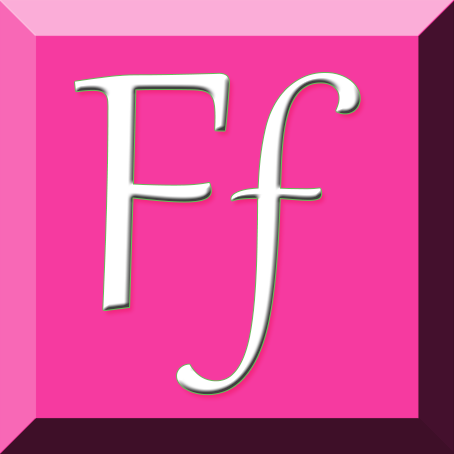
<style>
.page{position:relative;width:454px;height:454px;background:#f63aa0}
.page>*{position:absolute;margin:0}
.t1{font:415.4px "Gabriola";color:#ffffff}
.t2{font:353.1px "Gabriola";color:#ffffff}
</style>
<div class="page">
<p class="t1" style="left:75px;top:73px;width:285px;height:322px">F<span class="t2">f</span></p>
</div>
